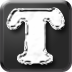
<style>
.page{position:relative;width:72px;height:72px}
.page>*{position:absolute;margin:0}
.t1{font:80px "CooperBlack";color:#ffffff}
</style>
<div class="page">
<p class="t1" style="left:7px;top:8px;width:57px;height:56px">T</p>
</div>
